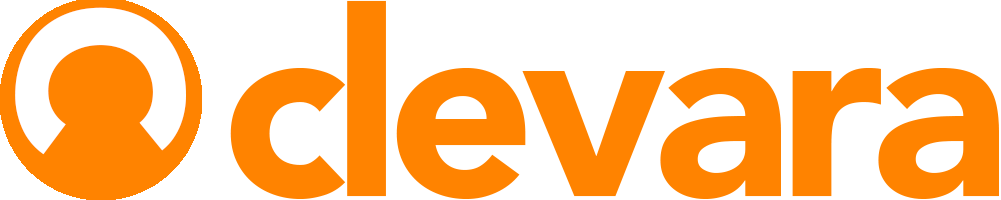
<style>
.page{position:relative;width:1001px;height:200px;background:#ffffff}
.page>*{position:absolute;margin:0}
.t1{font:258.3px "Avenir-Black";letter-spacing:-0.05em;color:#ff8400}
.t2{font:229.2px "Avenir-Black";letter-spacing:-0.05em;color:#ffffff}
</style>
<div class="page">
<p class="t1" style="left:230px;top:0px;width:769px;height:199px">clevara</p>
<p class="t2" style="left:15px;top:7px;width:171px;height:148px;rotate:90deg">C</p>
</div>
